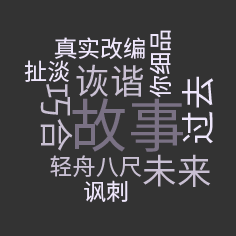
<style>
.page{position:relative;width:236px;height:236px;background:#333333}
.page>*{position:absolute;margin:0}
.t1{font:23.1px "SourceHanSansCN-Regular";color:#eee6fb}
.t2{font:34.7px "SourceHanSansCN-Regular";color:#c9c0d3}
.t3{font:34.7px "SourceHanSansCN-Regular";color:#eee6fb}
.t4{font:57.8px "SourceHanSansCN-Regular";color:#7a7184}
.t5{font:23.1px "SourceHanSansCN-Regular";color:#c9c0d3}
</style>
<div class="page">
<p class="t1" style="left:149px;top:30px;width:22px;height:68px;rotate:-90deg">你细品</p>
<p class="t1" style="left:54px;top:37px;width:91px;height:23px">真实改编</p>
<p class="t1" style="left:24px;top:60px;width:45px;height:22px">扯淡</p>
<p class="t2" style="left:76px;top:64px;width:67px;height:33px">诙谐</p>
<p class="t3" style="left:182px;top:76px;width:32px;height:68px;rotate:-90deg">过去</p>
<p class="t2" style="left:40px;top:84px;width:33px;height:67px;rotate:90deg">巧合</p>
<p class="t4" style="left:72px;top:98px;width:111px;height:54px">故事</p>
<p class="t5" style="left:50px;top:155px;width:92px;height:22px">轻舟八尺</p>
<p class="t2" style="left:143px;top:154px;width:68px;height:33px">未来</p>
<p class="t1" style="left:84px;top:180px;width:44px;height:23px">讽刺</p>
</div>
